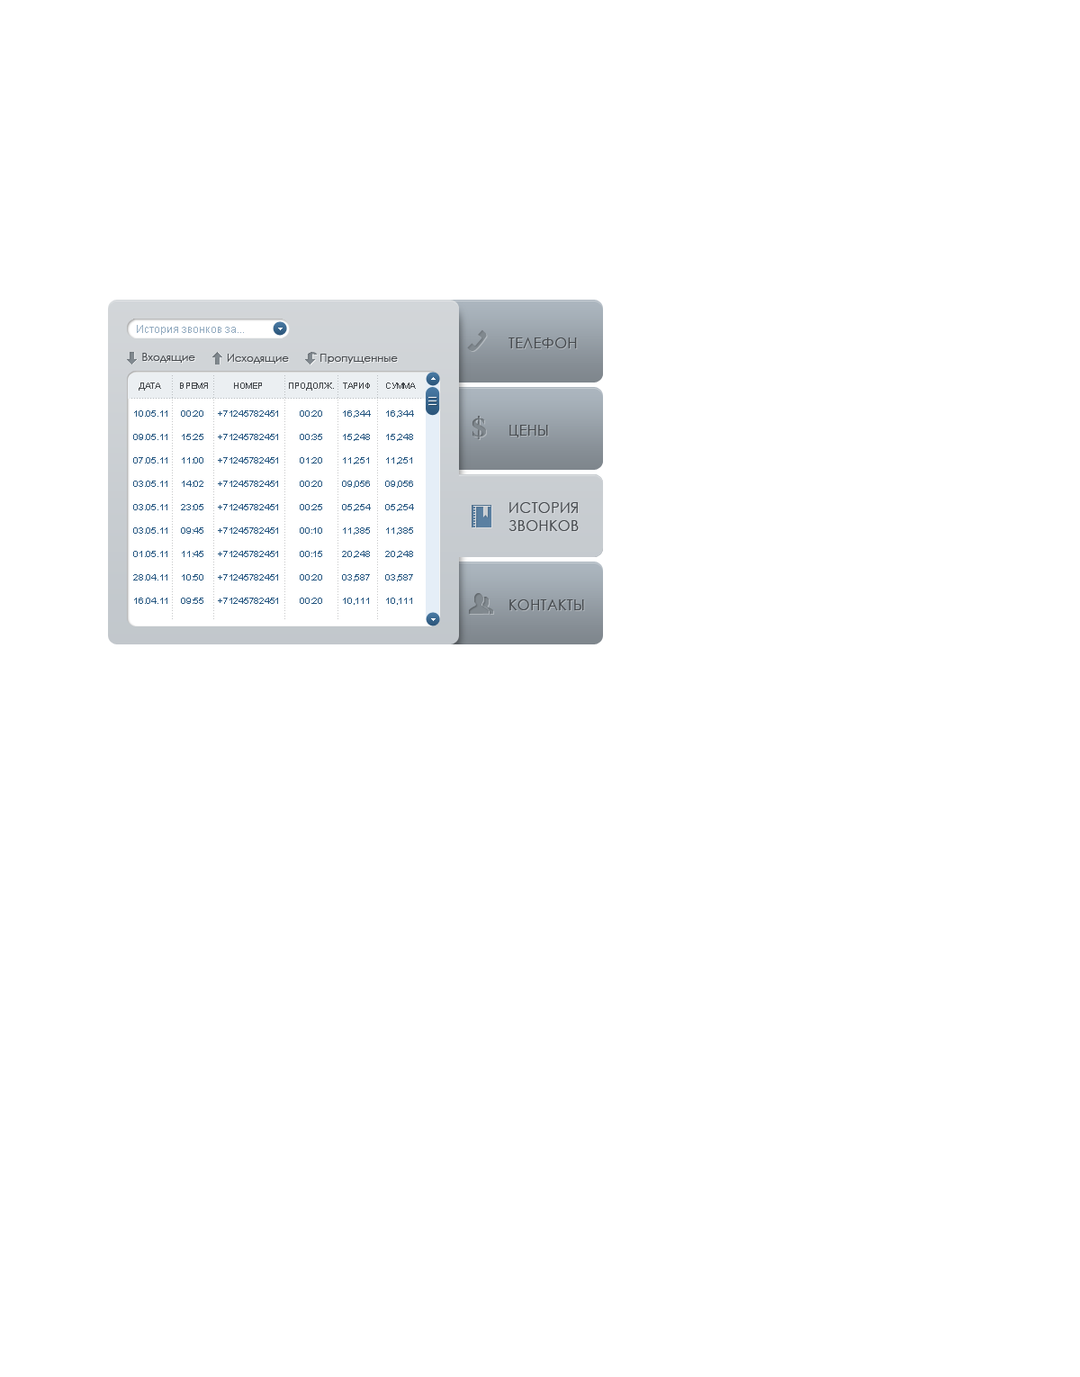
<style>
.page{position:relative;width:1080px;height:1377px;background:#ffffff}
.page>*{position:absolute;margin:0}
.t1{font:10.8px "ArialMT";color:#93abc0}
.t2{font:14.4px/87.3px "CenturyGothic";letter-spacing:0.025em;color:#45494d;text-transform:uppercase}
.t3{font:14.4px/77.4px "CenturyGothic";letter-spacing:0.025em;color:#45494d;text-transform:uppercase}
.t4{font:14.4px/18px "CenturyGothic";letter-spacing:0.025em;color:#45494d;text-transform:uppercase}
.t5{font:14.4px/79.2px "CenturyGothic";letter-spacing:0.025em;color:#45494d;text-transform:uppercase}
.t6{font:10.8px "CenturyGothic";letter-spacing:-0.01em;color:#45494d}
.t7{font:8.1px "ArialMT";color:#c7c8c9;text-transform:uppercase}
.t8{font:8.1px "ArialMT";letter-spacing:0.005em;color:#45494d;text-transform:uppercase}
.t9{font:8.1px "ArialMT";color:#b9bdc0;text-transform:uppercase}
.t10{font:9px/23.4px "ArialMT";letter-spacing:-0.025em;color:#275882}
</style>
<div class="page">
<p class="t1" style="left:137px;top:325px;width:107px;height:10px">История звонков за...</p>
<p class="t2" style="left:508px;top:338px;width:76px;height:272px">телефон<br>цены<br><span class="t3">история<br></span><span class="t4">звонков<br></span><span class="t5">контакты</span></p>
<p class="t6" style="left:142px;top:353px;width:53px;height:10px">Входящие</p>
<p class="t6" style="left:228px;top:354px;width:61px;height:10px">Исходящие</p>
<p class="t6" style="left:320px;top:354px;width:78px;height:10px">Пропущенные</p>
<p class="t7" style="left:172px;top:375px;width:1px;height:244px;rotate:90deg">...........................................................................................</p>
<p class="t7" style="left:213px;top:375px;width:1px;height:244px;rotate:90deg">...........................................................................................</p>
<p class="t7" style="left:284px;top:375px;width:1px;height:244px;rotate:90deg">...........................................................................................</p>
<p class="t7" style="left:338px;top:375px;width:0px;height:244px;rotate:90deg">...........................................................................................</p>
<p class="t7" style="left:377px;top:375px;width:1px;height:244px;rotate:90deg">...........................................................................................</p>
<p class="t8" style="left:139px;top:382px;width:277px;height:9px">Дата       Время         Номер         Продолж.   Тариф     Сумма</p>
<p class="t9" style="left:131px;top:398px;width:290px;height:1px">............................................................................................................</p>
<p class="t10" style="left:133px;top:410px;width:34px;height:194px">10.05.11<br>09.05.11<br>07.05.11<br>03.05.11<br>03.05.11<br>03.05.11<br>01.05.11<br>28.04.11<br>16.04.11<br>16.04.11</p>
<p class="t10" style="left:181px;top:410px;width:22px;height:194px">00:20<br>15:25<br>11:00<br>14:02<br>23:05<br>09:45<br>11:45<br>10:50<br>09:55<br>11:03</p>
<p class="t10" style="left:218px;top:410px;width:60px;height:194px">+71245782451<br>+71245782451<br>+71245782451<br>+71245782451<br>+71245782451<br>+71245782451<br>+71245782451<br>+71245782451<br>+71245782451<br>+71245782451</p>
<p class="t10" style="left:300px;top:410px;width:22px;height:194px">00:20<br>00:35<br>01:20<br>00:20<br>00:25<br>00:10<br>00:15<br>00:20<br>00:20<br>00:23</p>
<p class="t10" style="left:342px;top:410px;width:29px;height:195px">16,344<br>15,248<br>11,251<br>09,056<br>05,254<br>11,385<br>20,248<br>03,587<br>10,111<br>16,548</p>
<p class="t10" style="left:385px;top:410px;width:29px;height:195px">16,344<br>15,248<br>11,251<br>09,056<br>05,254<br>11,385<br>20,248<br>03,587<br>10,111<br>16,548</p>
</div>
